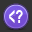
<style>
.page{position:relative;width:32px;height:32px;background:#333333}
.page>*{position:absolute;margin:0}
.t1{font:28.4px "Arial-ItalicMT";letter-spacing:-0.04em;color:#ffffff;scale:0.4 1}
.t2{font:18.2px "Arial-BoldMT";letter-spacing:-0.04em;color:#ffffff;scale:0.73 1}
</style>
<div class="page">
<p class="t1" style="left:9px;top:10px;width:6px;height:13px">&lt;</p>
<p class="t2" style="left:16px;top:10px;width:7px;height:13px">?</p>
</div>
